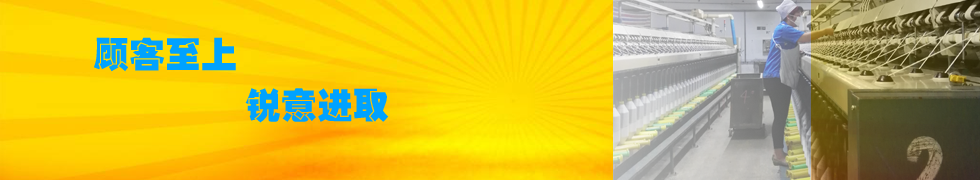
<style>
.page{position:relative;width:980px;height:180px}
.page>*{position:absolute;margin:0}
.t1{font:36px "HYb4gj";color:#00a2ff}
</style>
<div class="page">
<p class="t1" style="left:94px;top:37px;width:142px;height:35px">顾客至上</p>
<p class="t1" style="left:245px;top:88px;width:144px;height:35px">锐意进取</p>
</div>
